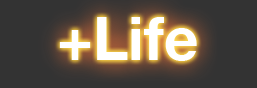
<style>
.page{position:relative;width:257px;height:88px;background:#333333}
.page>*{position:absolute;margin:0}
.t1{font:60px "HelveticaNeue-Bold";color:#ffffff}
</style>
<div class="page">
<p class="t1" style="left:59px;top:17px;width:138px;height:44px">+Life</p>
</div>
